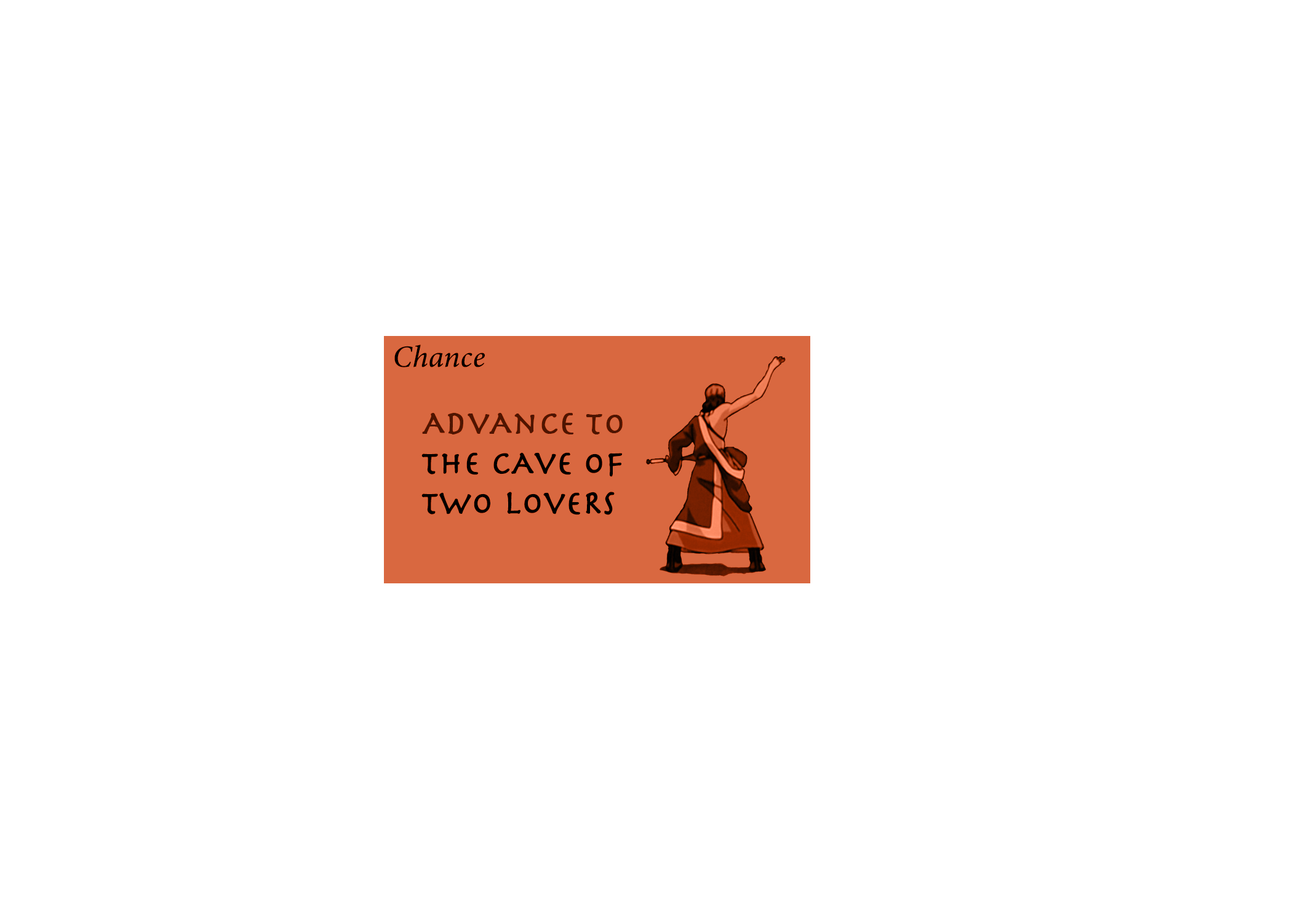
<style>
.page{position:relative;width:1292px;height:923px;background:#ffffff}
.page>*{position:absolute;margin:0}
.t1{font:30.8px "MinionConceptItalic-MediumItalic";color:#000000;font-weight:bold}
.t2{font:33.3px "Herculanum";color:#4e1501;font-weight:bold}
.t3{font:33.3px "Herculanum";color:#000000;font-weight:bold}
.t4{font:33.3px "Herculanum";color:#351d15;font-weight:bold}
</style>
<div class="page">
<p class="t1" style="left:394px;top:345px;width:91px;height:22px">Chance</p>
<p class="t2" style="left:422px;top:413px;width:201px;height:21px">AdvAnce to</p>
<p class="t3" style="left:421px;top:452px;width:202px;height:63px"><span class="t4"><br></span>the cAve of<br>two loveRs</p>
</div>
